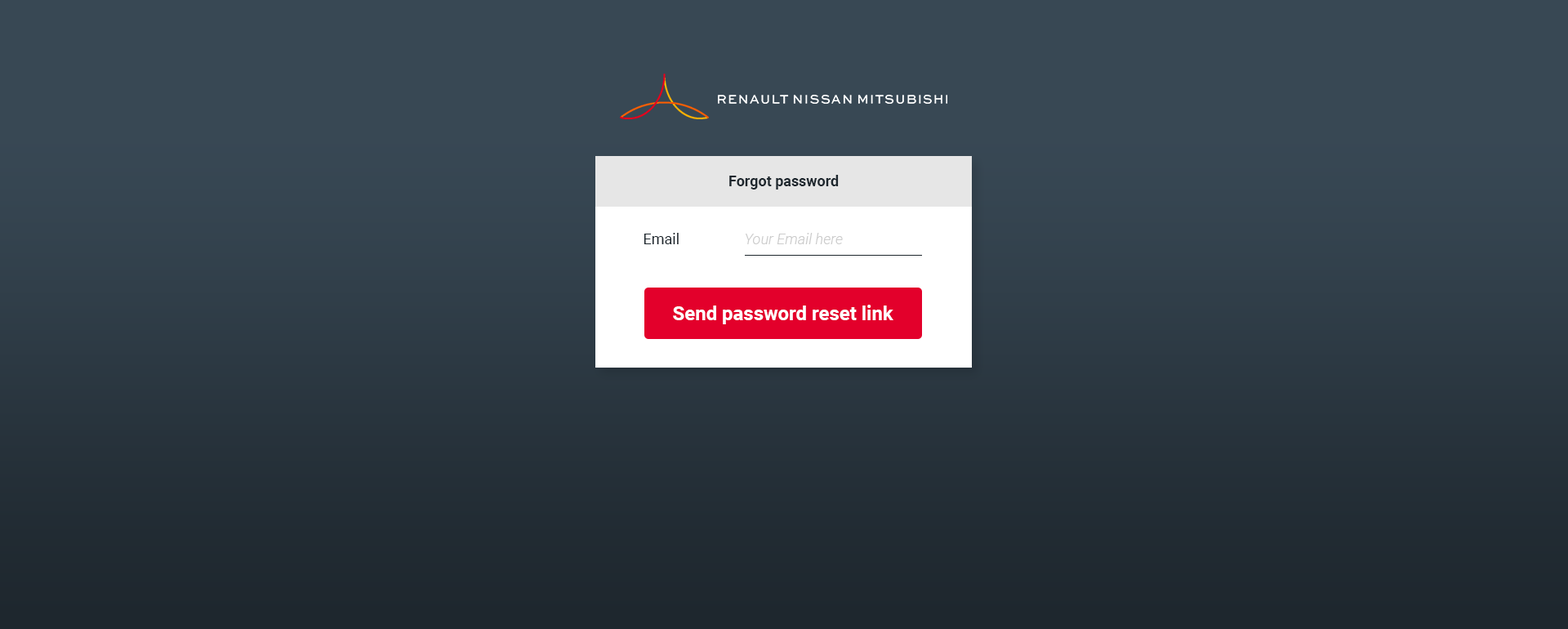
<style>
.page{position:relative;width:1568px;height:629px;background:#384854}
.page>*{position:absolute;margin:0}
.t1{font:14.7px "Roboto-Bold";color:#1e272e}
.t2{font:14.7px "Roboto-Regular";color:#1e272e}
.t3{font:14.7px "Roboto-LightItalic";color:#cccccc}
.t4{font:19.6px "Roboto-Bold";color:#ffffff}
</style>
<div class="page">
<p class="t1" style="left:729px;top:175px;width:110px;height:14px">Forgot password</p>
<p class="t2" style="left:644px;top:233px;width:35px;height:11px">Email</p>
<p class="t3" style="left:745px;top:233px;width:98px;height:11px">Your Email here</p>
<p class="t4" style="left:673px;top:305px;width:220px;height:19px">Send password reset link</p>
</div>
